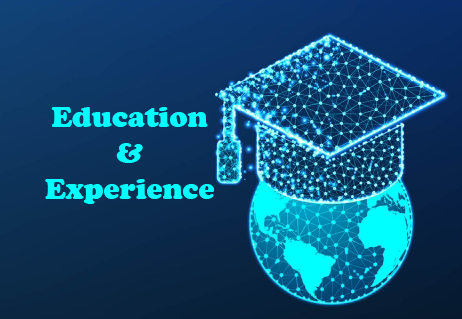
<style>
.page{position:relative;width:462px;height:319px}
.page>*{position:absolute;margin:0}
.t1{font:30px "CooperBlack";color:#00ffff}
</style>
<div class="page">
<p class="t1" style="left:45px;top:107px;width:169px;height:97px;text-align:center">Education<br>&amp;<br>Experience</p>
</div>
